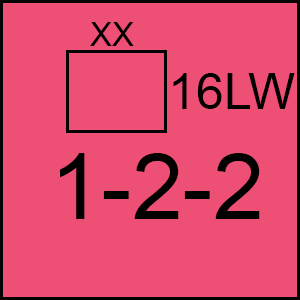
<style>
.page{position:relative;width:300px;height:300px;background:#ee4f74}
.page>*{position:absolute;margin:0}
.t1{font:33.3px "ArialMT";color:#000000}
.t2{font:50px "ArialMT";color:#000000}
.t3{font:91.7px "ArialMT";color:#000000}
</style>
<div class="page">
<p class="t1" style="left:90px;top:22px;width:44px;height:24px">XX</p>
<p class="t2" style="left:173px;top:73px;width:122px;height:36px">16LW</p>
<p class="t3" style="left:60px;top:153px;width:200px;height:66px">1-2-2</p>
</div>
